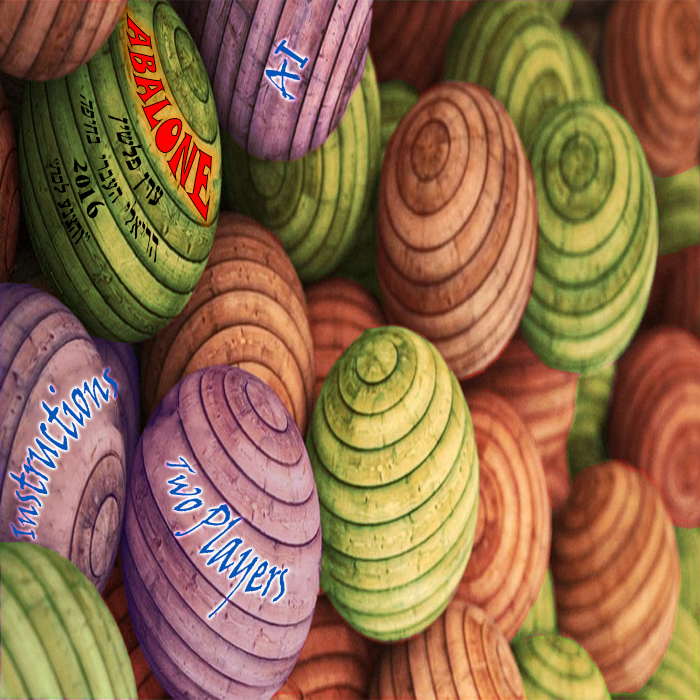
<style>
.page{position:relative;width:700px;height:700px}
.page>*{position:absolute;margin:0}
.t1{font:32px "SnapITC-Regular";color:#ff0000;scale:0.96 1}
.t2{font:40px "VinerHandITC";color:#0454b8}
.t3{font:40px "Tahoma";color:#0454b8}
.t4{font:18.7px "GuttmanFrank";color:#000000;scale:1.03 1}
.t5{font:22.7px "GuttmanFrank-Bold";color:#000000}
.t6{font:18.7px "GuttmanFrank-Bold";color:#000000}
.t7{font:24px "GuttmanFrank-Bold";color:#000000}
.t8{font:32px "VinerHandITC";color:#0454b8}
</style>
<div class="page">
<p class="t1" style="left:125px;top:11px;width:87px;height:212px;rotate:67deg">ABALONE</p>
<p class="t2" style="left:265px;top:39px;width:44px;height:61px;rotate:-70deg">A<span class="t3">I</span></p>
<p class="t4" style="left:79px;top:93px;width:80px;height:170px;rotate:65deg">הפיחב ירבעה ילאירה</p>
<p class="t5" style="left:107px;top:115px;width:57px;height:91px;rotate:65deg">ןישלפ ןרע</p>
<p class="t6" style="left:48px;top:158px;width:43px;height:87px;rotate:71deg">“תכל ענצהו”</p>
<p class="t7" style="left:74px;top:157px;width:31px;height:62px;rotate:71deg">2016</p>
<p class="t8" style="left:9px;top:368px;width:109px;height:172px;rotate:-60deg">Instructions</p>
<p class="t8" style="left:166px;top:457px;width:122px;height:162px;rotate:50deg">Two Players</p>
</div>
